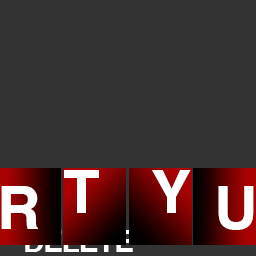
<style>
.page{position:relative;width:256px;height:256px;background:#333333}
.page>*{position:absolute;margin:0}
.t1{font:60px "Helvetica-Bold";letter-spacing:-0.05em;color:#ffffff}
.t2{font:30px "Helvetica-Bold";letter-spacing:-0.05em}
</style>
<div class="page">
<p class="t1" style="left:64px;top:170px;width:35px;height:43px">T</p>
<p class="t1" style="left:152px;top:170px;width:39px;height:43px">Y</p>
<p class="t1" style="left:1px;top:186px;width:37px;height:43px">R</p>
<p class="t1" style="left:218px;top:186px;width:36px;height:44px">U</p>
<p class="t2" style="left:25px;top:230px;width:108px;height:22px">DELETE</p>
</div>
